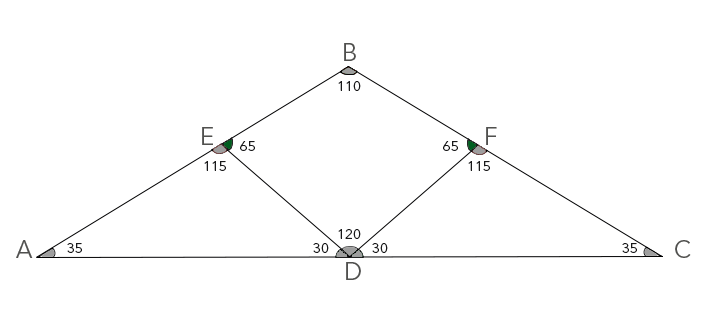
<style>
.page{position:relative;width:706px;height:333px;background:#ffffff}
.page>*{position:absolute;margin:0}
.t1{font:14px "AvenirNextLTPro-Regular";color:#19191a}
</style>
<div class="page">
<p class="t1" style="left:338px;top:81px;width:23px;height:10px">110</p>
<p class="t1" style="left:240px;top:141px;width:15px;height:10px">65</p>
<p class="t1" style="left:443px;top:141px;width:15px;height:10px">65</p>
<p class="t1" style="left:204px;top:161px;width:22px;height:10px">115</p>
<p class="t1" style="left:468px;top:161px;width:22px;height:10px">115</p>
<p class="t1" style="left:338px;top:229px;width:23px;height:10px">120</p>
<p class="t1" style="left:67px;top:243px;width:15px;height:10px">35</p>
<p class="t1" style="left:313px;top:243px;width:16px;height:10px">30</p>
<p class="t1" style="left:372px;top:243px;width:16px;height:10px">30</p>
<p class="t1" style="left:622px;top:243px;width:15px;height:10px">35</p>
</div>
